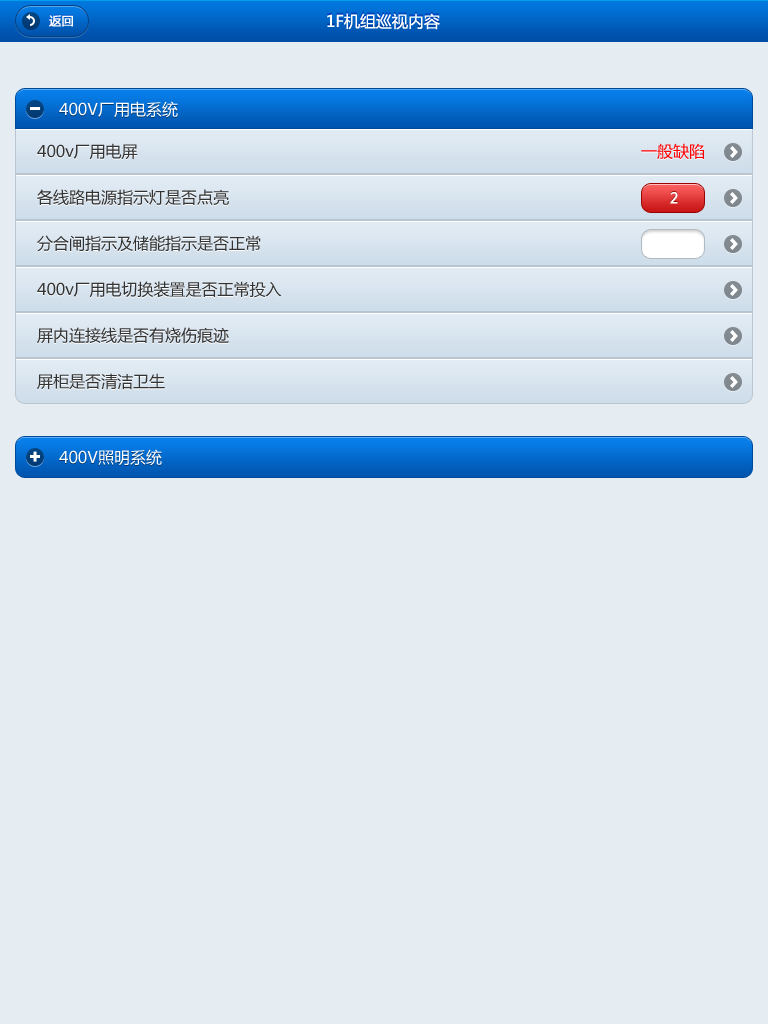
<style>
.page{position:relative;width:768px;height:1024px;background:#e5ecf2}
.page>*{position:absolute;margin:0}
.t1{font:12px "MicrosoftYaHei";color:#ffffff;font-weight:bold}
.t2{font:16px "MicrosoftYaHei";color:#ffffff}
.t3{font:16px "MicrosoftYaHei";color:#333333}
.t4{font:16px "MicrosoftYaHei";color:#ff0000}
.t5{font:14px "MicrosoftYaHei";color:#ffffff;font-weight:bold}
</style>
<div class="page">
<p class="t1" style="left:49px;top:15px;width:24px;height:12px">返回</p>
<p class="t2" style="left:327px;top:13px;width:113px;height:17px">1F机组巡视内容</p>
<p class="t2" style="left:59px;top:101px;width:119px;height:17px">400V厂用电系统</p>
<p class="t3" style="left:37px;top:143px;width:101px;height:17px">400v厂用电屏</p>
<p class="t4" style="left:641px;top:143px;width:63px;height:17px">一般缺陷</p>
<p class="t3" style="left:37px;top:189px;width:192px;height:17px">各线路电源指示灯是否点亮</p>
<p class="t5" style="left:670px;top:192px;width:8px;height:12px">2</p>
<p class="t3" style="left:37px;top:235px;width:224px;height:17px">分合闸指示及储能指示是否正常</p>
<p class="t3" style="left:37px;top:281px;width:245px;height:17px">400v厂用电切换装置是否正常投入</p>
<p class="t3" style="left:37px;top:327px;width:192px;height:17px">屏内连接线是否有烧伤痕迹</p>
<p class="t3" style="left:37px;top:373px;width:128px;height:17px">屏柜是否清洁卫生</p>
<p class="t2" style="left:59px;top:449px;width:103px;height:17px">400V照明系统</p>
</div>
